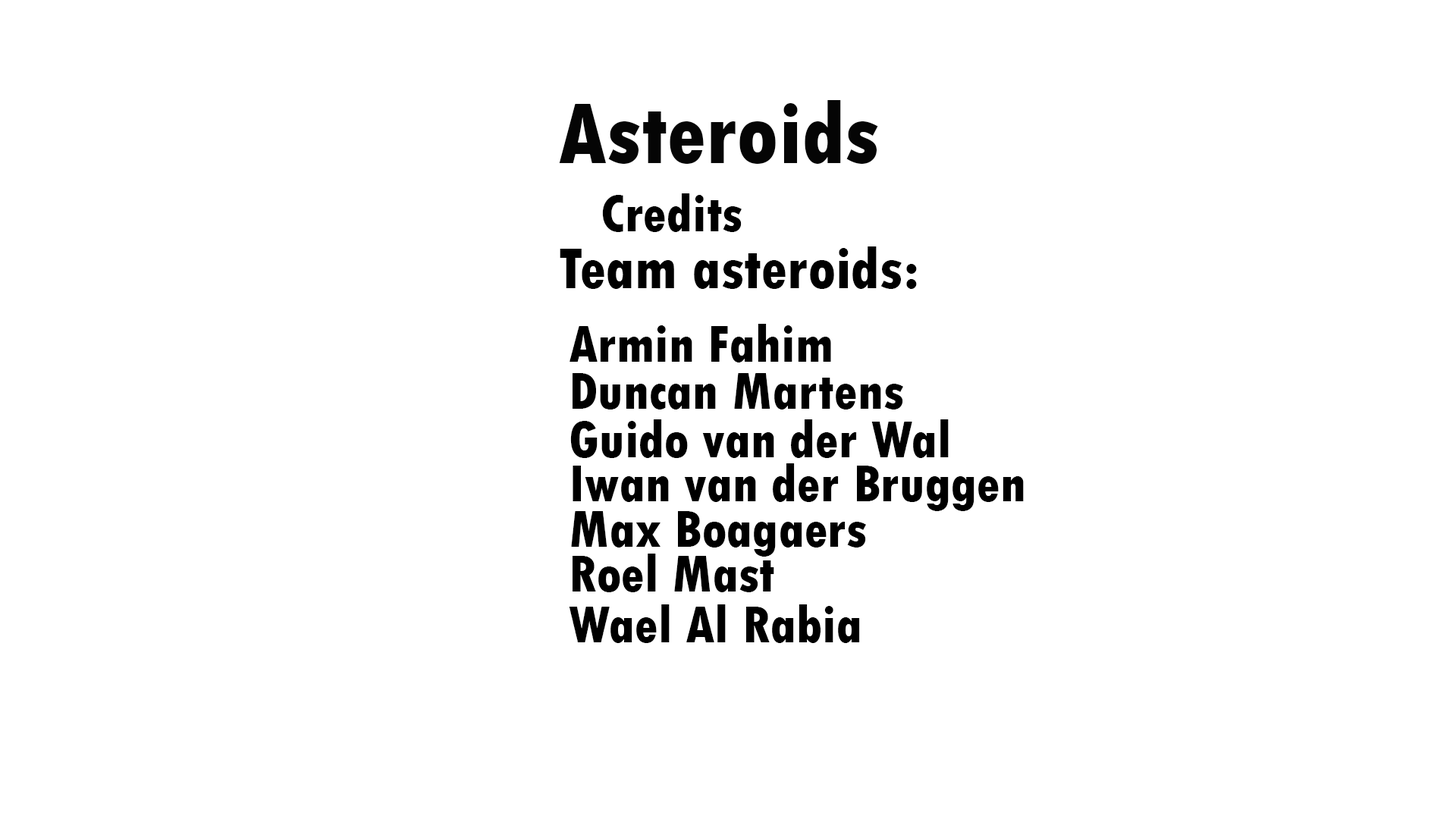
<style>
.page{position:relative;width:1456px;height:819px;background:#ffffff}
.page>*{position:absolute;margin:0}
.t1{font:91px "TwCenMT-CondensedExtraBold";color:#000000}
.t2{font:54.6px "TwCenMT-CondensedExtraBold";color:#000000}
.t3{font:60.7px "TwCenMT-CondensedExtraBold";color:#000000}
</style>
<div class="page">
<p class="t1" style="left:559px;top:100px;width:319px;height:64px">Asteroids</p>
<p class="t2" style="left:602px;top:193px;width:140px;height:39px">Credits</p>
<p class="t3" style="left:560px;top:246px;width:357px;height:43px">Team asteroids:</p>
<p class="t2" style="left:570px;top:324px;width:261px;height:38px">Armin Fahim</p>
<p class="t2" style="left:573px;top:373px;width:330px;height:36px">Duncan Martens</p>
<p class="t2" style="left:570px;top:419px;width:379px;height:39px">Guido van der Wal</p>
<p class="t2" style="left:573px;top:463px;width:451px;height:48px">Iwan van der Bruggen</p>
<p class="t2" style="left:571px;top:511px;width:295px;height:46px">Max Boagaers</p>
<p class="t2" style="left:573px;top:554px;width:201px;height:38px">Roel Mast</p>
<p class="t2" style="left:569px;top:604px;width:291px;height:39px">Wael Al Rabia</p>
</div>
